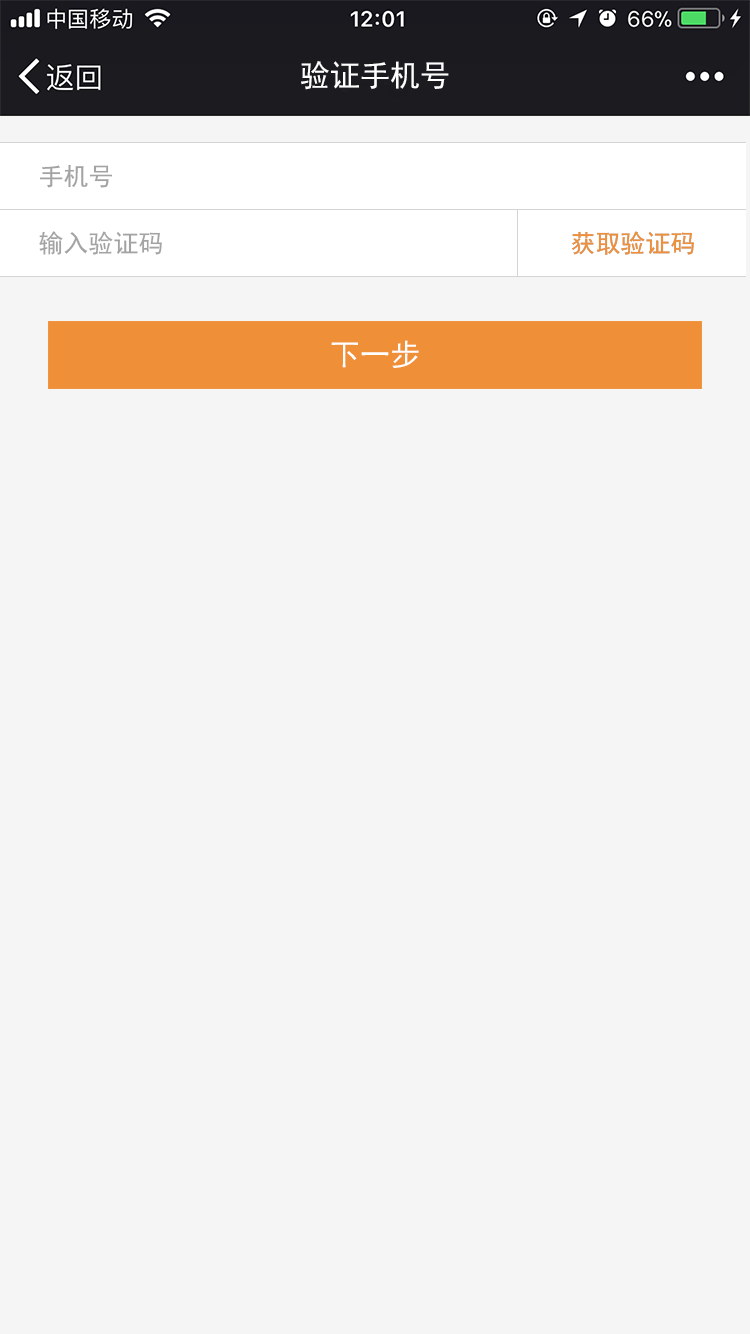
<style>
.page{position:relative;width:750px;height:1334px;background:#f5f5f5}
.page>*{position:absolute;margin:0}
.t1{font:30.5px "SimHei";color:#ffffff}
.t2{font:25px "SimHei";color:#a3a3a3}
.t3{font:25px "SimHei";color:#ef9039}
</style>
<div class="page">
<p class="t1" style="left:301px;top:61px;width:148px;height:29px">验证手机号</p>
<p class="t2" style="left:39px;top:164px;width:74px;height:24px">手机号</p>
<p class="t2" style="left:39px;top:231px;width:123px;height:24px">输入验证码</p>
<p class="t3" style="left:572px;top:231px;width:122px;height:24px">获取验证码</p>
<p class="t3" style="left:572px;top:231px;width:122px;height:24px">获取验证码</p>
<p class="t1" style="left:331px;top:340px;width:88px;height:28px">下一步</p>
</div>
